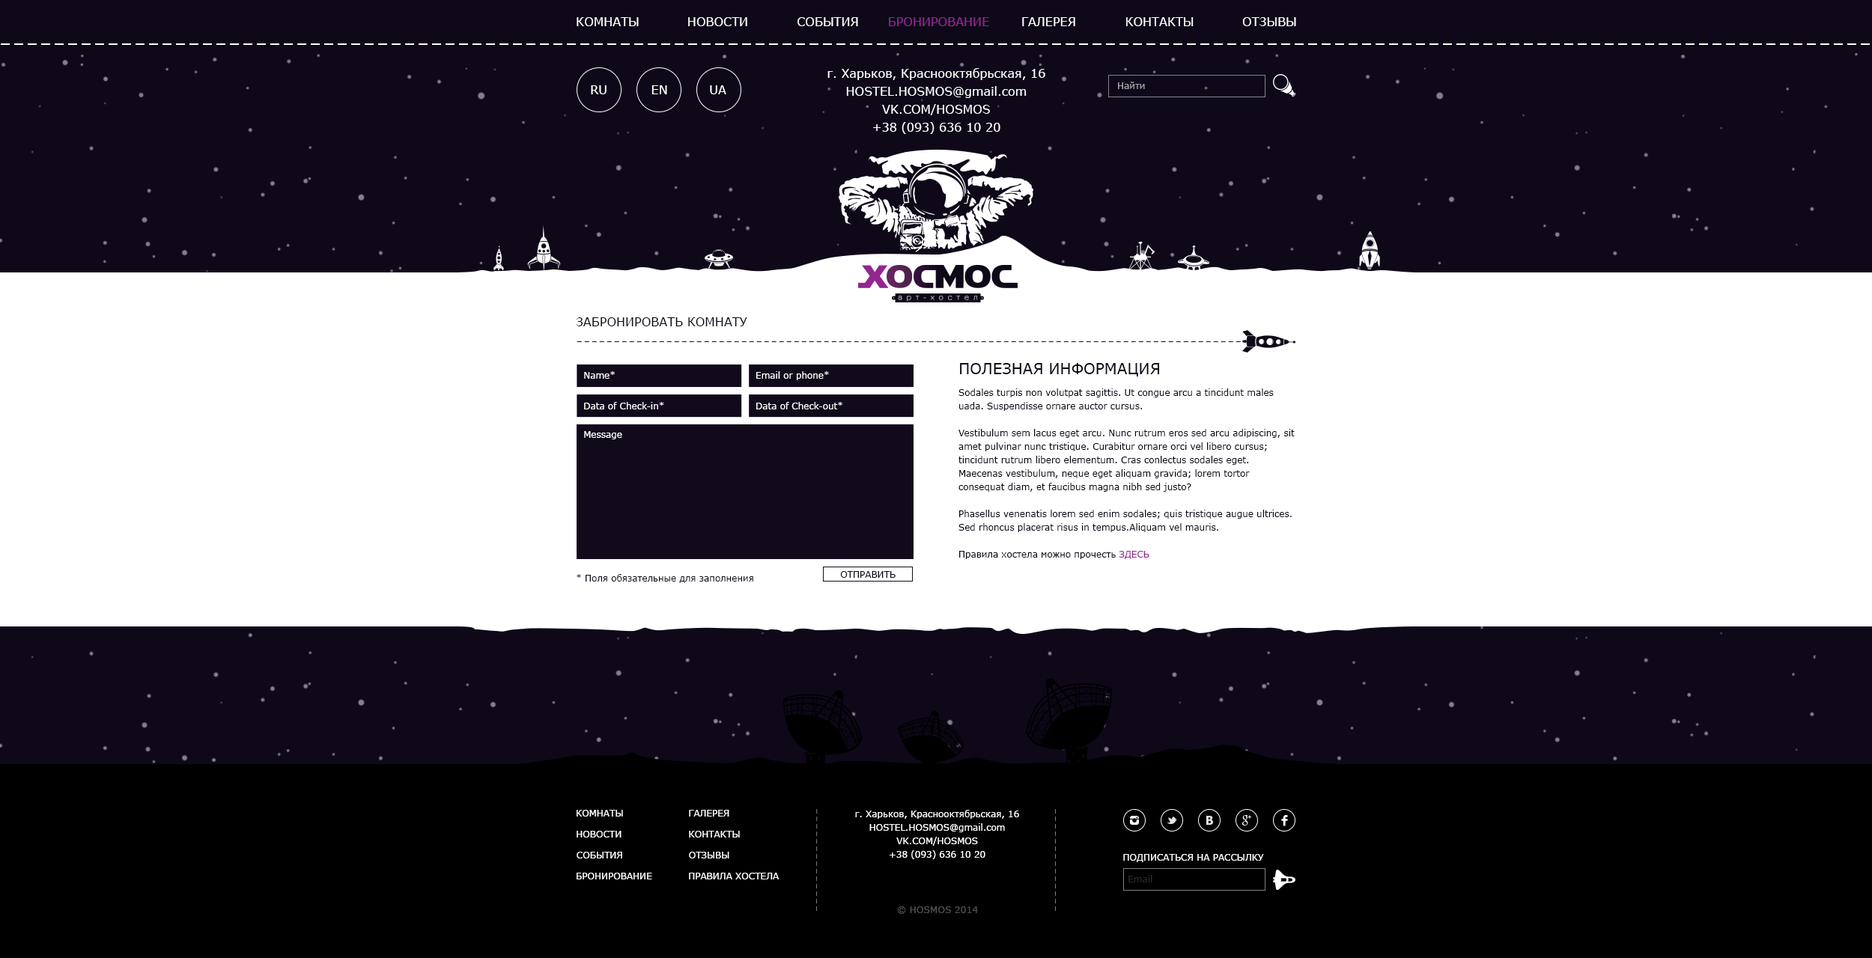
<style>
.page{position:relative;width:1872px;height:958px;background:#0e0819}
.page>*{position:absolute;margin:0}
.t1{font:12px "Verdana";color:#ffffff}
.t2{font:12px "Verdana";color:#92278f}
.t3{font:12px/18px "Verdana";color:#ffffff}
.t4{font:9px "Verdana";color:#a6a5a8}
.t5{font:11.9px "Verdana";color:#0e0819;text-transform:uppercase}
.t6{font:15px "Verdana";color:#0e0819;text-transform:uppercase}
.t7{font:9px "Verdana";color:#ffffff}
.t8{font:9px/13.5px "Verdana";color:#0e0819}
.t9{font:9px/13.5px "Verdana";color:#92278f}
.t10{font:9px "Verdana";color:#100a1b}
.t11{font:9px "Verdana";color:#100a1b;text-transform:uppercase}
.t12{font:9px/13.5px "Verdana";color:#ffffff}
.t13{font:9px "Verdana";color:#282828}
.t14{font:9px "Verdana";color:#505050}
</style>
<div class="page">
<p class="t1" style="left:576px;top:17px;width:63px;height:9px">КОМНАТЫ</p>
<p class="t1" style="left:688px;top:17px;width:59px;height:9px">НОВОСТИ</p>
<p class="t1" style="left:797px;top:17px;width:61px;height:9px">СОБЫТИЯ</p>
<p class="t2" style="left:889px;top:17px;width:100px;height:9px">БРОНИРОВАНИЕ</p>
<p class="t1" style="left:1022px;top:17px;width:53px;height:9px">ГАЛЕРЕЯ</p>
<p class="t1" style="left:1126px;top:17px;width:67px;height:9px">КОНТАКТЫ</p>
<p class="t1" style="left:1242px;top:17px;width:54px;height:9px">ОТЗЫВЫ</p>
<p class="t3" style="left:827px;top:68px;width:218px;height:66px;text-align:center">г. Харьков, Краснооктябрьская, 16<br>HOSTEL.HOSMOS@gmail.com<br>VK.COM/HOSMOS<br>+38 (093) 636 10 20</p>
<p class="t1" style="left:591px;top:85px;width:15px;height:9px">RU</p>
<p class="t1" style="left:651px;top:85px;width:16px;height:9px">EN</p>
<p class="t1" style="left:710px;top:85px;width:16px;height:9px">UA</p>
<p class="t4" style="left:1118px;top:82px;width:27px;height:7px">Найти</p>
<p class="t5" style="left:576px;top:317px;width:171px;height:9px">Забронировать комнату</p>
<p class="t6" style="left:960px;top:363px;width:200px;height:14px">ПОЛЕЗНАЯ ИНФОРМАЦИЯ</p>
<p class="t7" style="left:584px;top:371px;width:31px;height:8px">Name*</p>
<p class="t7" style="left:756px;top:371px;width:73px;height:9px">Email or phone*</p>
<p class="t8" style="left:958px;top:389px;width:337px;height:170px">Sodales turpis non volutpat sagittis. Ut congue arcu a tincidunt males uada. Suspendisse ornare auctor cursus.<br><br>Vestibulum sem lacus eget arcu. Nunc rutrum eros sed arcu adipiscing, sit amet pulvinar nunc tristique. Curabitur ornare orci vel libero cursus; tincidunt rutrum libero elementum. Cras conlectus sodales eget. Maecenas vestibulum, neque eget aliquam gravida; lorem tortor consequat diam, et faucibus magna nibh sed justo?<br><br>Phasellus venenatis lorem sed enim sodales; quis tristique augue ultrices. Sed rhoncus placerat risus in tempus.Aliquam vel mauris.<br><br>Правила хостела можно прочесть <span class="t9">ЗДЕСЬ</span></p>
<p class="t7" style="left:584px;top:402px;width:80px;height:8px">Data of Check-in*</p>
<p class="t7" style="left:756px;top:402px;width:86px;height:8px">Data of Check-out*</p>
<p class="t7" style="left:584px;top:431px;width:38px;height:8px">Message</p>
<p class="t10" style="left:576px;top:574px;width:177px;height:9px">* Поля обязательные для заполнения</p>
<p class="t11" style="left:840px;top:571px;width:55px;height:7px">Отправить</p>
<p class="t7" style="left:576px;top:810px;width:47px;height:7px">КОМНАТЫ</p>
<p class="t7" style="left:689px;top:810px;width:40px;height:7px">ГАЛЕРЕЯ</p>
<p class="t12" style="left:855px;top:810px;width:164px;height:50px;text-align:center">г. Харьков, Краснооктябрьская, 16<br>HOSTEL.HOSMOS@gmail.com<br>VK.COM/HOSMOS<br>+38 (093) 636 10 20</p>
<p class="t7" style="left:576px;top:831px;width:45px;height:7px">НОВОСТИ</p>
<p class="t7" style="left:689px;top:831px;width:51px;height:7px">КОНТАКТЫ</p>
<p class="t7" style="left:576px;top:852px;width:46px;height:7px">СОБЫТИЯ</p>
<p class="t7" style="left:689px;top:852px;width:40px;height:7px">ОТЗЫВЫ</p>
<p class="t7" style="left:1123px;top:854px;width:141px;height:9px">ПОДПИСАТЬСЯ НА РАССЫЛКУ</p>
<p class="t7" style="left:576px;top:873px;width:76px;height:7px">БРОНИРОВАНИЕ</p>
<p class="t7" style="left:689px;top:873px;width:90px;height:7px">ПРАВИЛА ХОСТЕЛА</p>
<p class="t13" style="left:1128px;top:875px;width:24px;height:8px">Email</p>
<p class="t14" style="left:897px;top:907px;width:81px;height:7px">© HOSMOS 2014</p>
</div>
